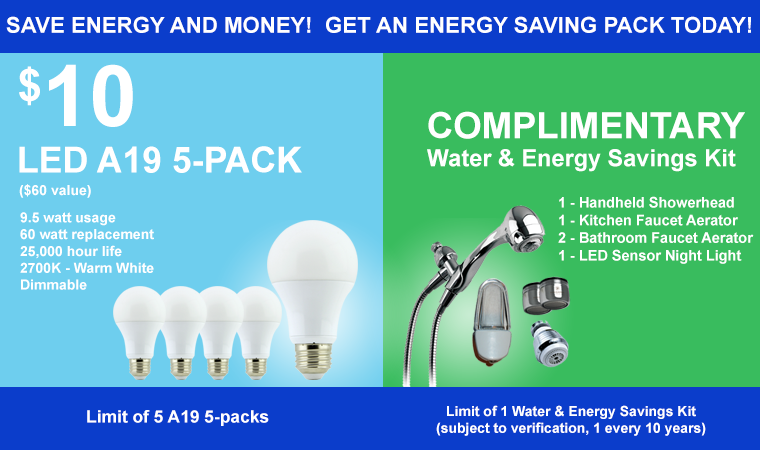
<style>
.page{position:relative;width:760px;height:450px;background:#39bc5e}
.page>*{position:absolute;margin:0}
.t1{font:21.9px "Arial-BoldMT";color:#ffffff}
.t2{font:85px "Arial-BoldMT";color:#ffffff}
.t3{font:76px "Arial-BoldMT";color:#ffffff}
.t4{font:23.4px "Arial-BoldMT";color:#ffffff}
.t5{font:36.3px "Arial-BoldMT";color:#ffffff}
.t6{font:35.6px "Arial-BoldMT";color:#ffffff;text-transform:uppercase}
.t7{font:14px "Arial-BoldMT";color:#ffffff}
.t8{font:14.7px "Arial-BoldMT";color:#ffffff}
.t9{font:17px "Arial-BoldMT";color:#ffffff}
</style>
<div class="page">
<p class="t1" style="left:6px;top:16px;width:745px;height:17px">SAVE ENERGY AND MONEY!  GET AN ENERGY SAVING PACK TODAY!</p>
<p class="t2" style="left:19px;top:64px;width:114px;height:63px"><span class="t3">$</span>10</p>
<p class="t4" style="left:427px;top:111px;width:318px;height:61px"><span class="t5">COMPLIMENTARY<br></span>Water &amp; Energy Savings Kit</p>
<p class="t6" style="left:19px;top:146px;width:283px;height:27px">LED A19 5-pack</p>
<p class="t7" style="left:19px;top:184px;width:72px;height:14px">($60 value)</p>
<p class="t8" style="left:558px;top:196px;width:196px;height:68px">1 - Handheld Showerhead<br>1 - Kitchen Faucet Aerator<br>2 - Bathroom Faucet Aerator<br>1 - LED Sensor Night Light</p>
<p class="t7" style="left:20px;top:212px;width:134px;height:78px">9.5 watt usage<br>60 watt replacement<br>25,000 hour life<br>2700K - Warm White<br>Dimmable</p>
<p class="t9" style="left:87px;top:410px;width:182px;height:16px">Limit of 5 A19 5-packs</p>
<p class="t7" style="left:436px;top:405px;width:270px;height:31px;text-align:center">Limit of 1 Water &amp; Energy Savings Kit<br>(subject to verification, 1 every 10 years)</p>
</div>
